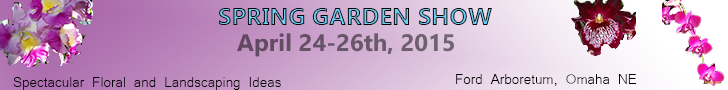
<style>
.page{position:relative;width:728px;height:90px}
.page>*{position:absolute;margin:0}
.t1{font:24px "NirmalaUI-Bold"}
.t2{font:24px "NirmalaUI-Bold";color:#695669}
.t3{font:18px "Microsoft-Yi-Baiti";color:#000000}
</style>
<div class="page">
<p class="t1" style="left:219px;top:8px;width:273px;height:17px">SPRING GARDEN SHOW</p>
<p class="t2" style="left:237px;top:33px;width:217px;height:24px">April 24-26th, 2015</p>
<p class="t3" style="left:13px;top:77px;width:268px;height:13px">Spectacular Floral and Landscaping Ideas</p>
<p class="t3" style="left:456px;top:74px;width:181px;height:12px">Ford Arboretum, Omaha NE</p>
</div>
